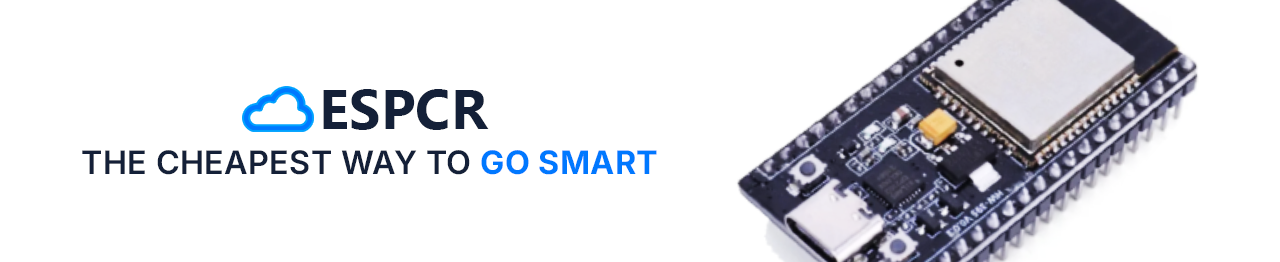
<style>
.page{position:relative;width:1280px;height:262px;background:#ffffff}
.page>*{position:absolute;margin:0}
.t1{font:55.6px "SegoeUIThis-Bold";letter-spacing:0.01em;color:#142038;font-variant:small-caps}
.t2{font:55.6px "Inter-SemiBold";letter-spacing:0.01em;color:#142038;text-transform:uppercase}
.t3{font:55.6px "Inter-Bold";letter-spacing:0.01em;color:#0078ff;text-transform:uppercase}
</style>
<div class="page">
<p class="t1" style="left:323px;top:89px;width:166px;height:41px">ESPCR</p>
<p class="t2" style="left:82px;top:150px;width:575px;height:25px">The Cheapest Way to <span class="t3">Go Smart</span></p>
</div>
